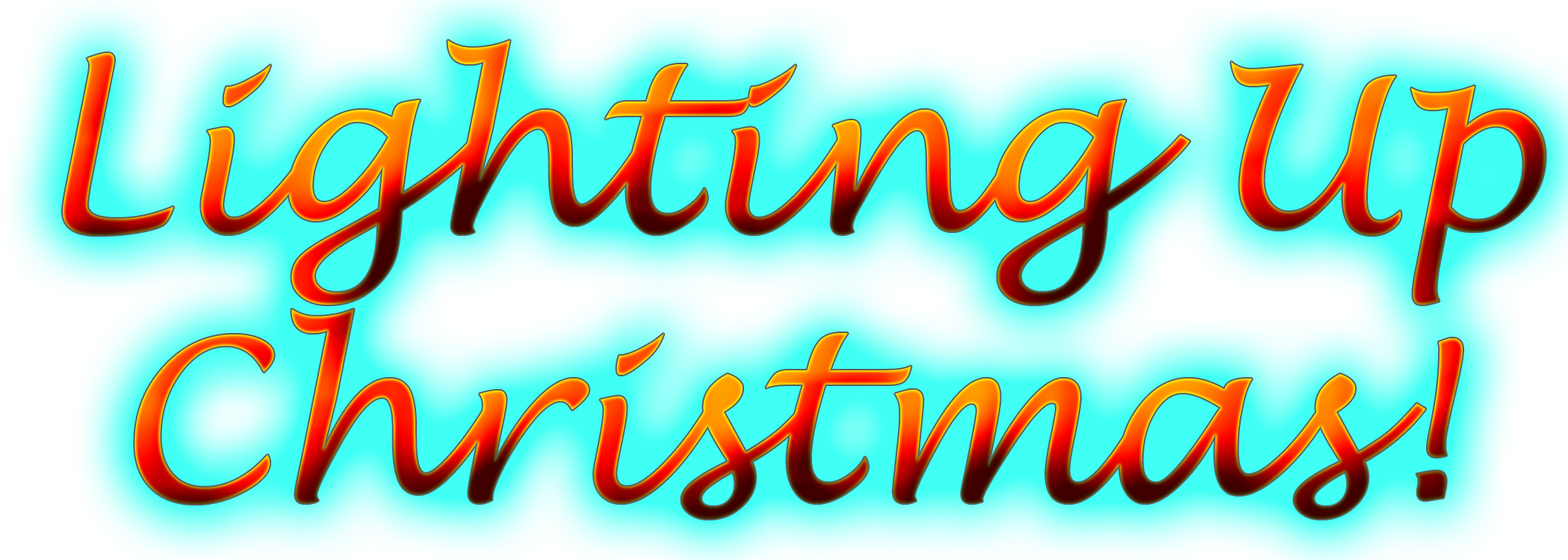
<style>
.page{position:relative;width:1568px;height:560px}
.page>*{position:absolute;margin:0}
.t1{font:224.1px "LucidaHandwriting-Italic"}
</style>
<div class="page">
<p class="t1" style="left:63px;top:40px;width:1483px;height:479px;text-align:center">Lighting Up Christmas!</p>
</div>
